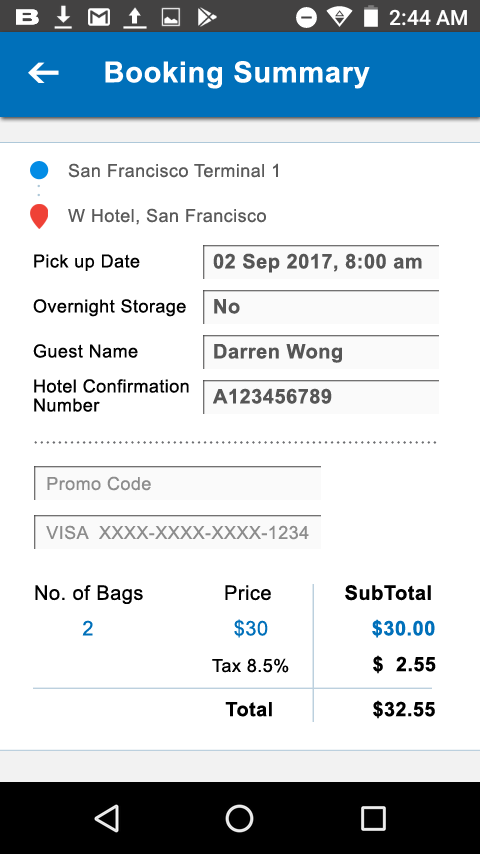
<style>
.page{position:relative;width:480px;height:854px;background:#ffffff}
.page>*{position:absolute;margin:0}
.t1{font:29px "Arial-BoldMT";letter-spacing:0.025em;color:#ffffff}
.t2{font:18px/45px "ArialMT";letter-spacing:0.025em;color:#5a5a5a}
.t3{font:18px "ArialMT";letter-spacing:0.025em;color:#010101}
.t4{font:20px "Arial-BoldMT";letter-spacing:0.025em;color:#565656}
.t5{font:18px/19px "ArialMT";letter-spacing:0.025em;color:#010101}
.t6{font:18px "ArialMT";letter-spacing:0.025em;color:#8c8c8c}
.t7{font:20px "ArialMT";letter-spacing:0.025em;color:#000000}
.t8{font:20px "Arial-BoldMT";letter-spacing:0.025em;color:#000000}
.t9{font:20px "ArialMT";letter-spacing:0.025em;color:#0070ba}
.t10{font:20px "Arial-BoldMT";letter-spacing:0.025em;color:#0070ba}
.t11{font:18px "ArialMT";letter-spacing:0.025em;color:#000000}
.t12{font:19.7px "Arial-BoldMT";letter-spacing:0.025em;color:#000000}
</style>
<div class="page">
<p class="t1" style="left:105px;top:61px;width:265px;height:28px">Booking Summary</p>
<p class="t2" style="left:68px;top:163px;width:210px;height:62px">San Francisco Terminal 1<br>W Hotel, San Francisco</p>
<p class="t3" style="left:34px;top:254px;width:106px;height:17px">Pick up Date</p>
<p class="t4" style="left:213px;top:253px;width:209px;height:20px">02 Sep 2017, 8:00 am</p>
<p class="t3" style="left:33px;top:299px;width:153px;height:18px">Overnight Storage</p>
<p class="t4" style="left:214px;top:299px;width:26px;height:15px">No</p>
<p class="t3" style="left:33px;top:344px;width:105px;height:14px">Guest Name</p>
<p class="t4" style="left:214px;top:344px;width:128px;height:19px">Darren Wong</p>
<p class="t5" style="left:34px;top:379px;width:155px;height:33px">Hotel Confirmation<br>Number</p>
<p class="t4" style="left:213px;top:388px;width:119px;height:16px">A123456789</p>
<p class="t6" style="left:47px;top:476px;width:104px;height:15px">Promo Code</p>
<p class="t6" style="left:46px;top:525px;width:263px;height:15px">VISA  XXXX-XXXX-XXXX-1234</p>
<p class="t7" style="left:35px;top:585px;width:396px;height:19px">No. of Bags             Price            <span class="t8">SubTotal</span></p>
<p class="t9" style="left:82px;top:619px;width:353px;height:19px">2                $30        <span class="t10">       $30.00</span></p>
<p class="t11" style="left:212px;top:658px;width:77px;height:15px">Tax 8.5%</p>
<p class="t12" style="left:373px;top:655px;width:63px;height:19px">$  2.55</p>
<p class="t12" style="left:225px;top:702px;width:47px;height:15px">Total</p>
<p class="t12" style="left:373px;top:700px;width:62px;height:19px">$32.55</p>
</div>
